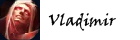
<style>
.page{position:relative;width:140px;height:40px;background:#ffffff}
.page>*{position:absolute;margin:0}
.t1{font:16px "VinerHandITC";color:#000000}
</style>
<div class="page">
<p class="t1" style="left:48px;top:13px;width:68px;height:18px">Vladimir</p>
</div>
